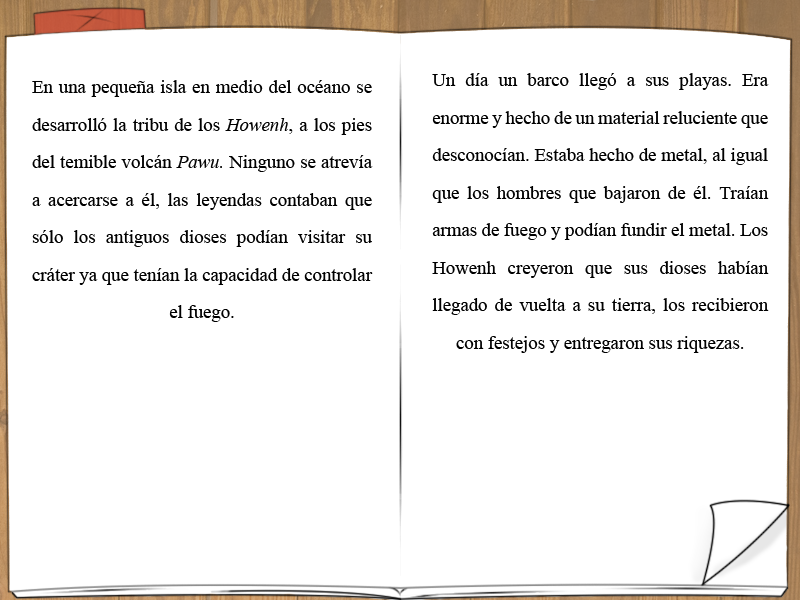
<style>
.page{position:relative;width:800px;height:600px;background:#ffffff}
.page>*{position:absolute;margin:0}
.t1{font:18.7px/37.5px "TimesNewRomanPSMT";color:#000000}
.t2{font:18.7px/37.5px "TimesNewRomanPS-ItalicMT";color:#000000}
</style>
<div class="page">
<p class="t1" style="left:432px;top:73px;width:337px;height:280px;text-align:justify">Un día un barco llegó a sus playas. Era enorme y hecho de un material reluciente que desconocían. Estaba hecho de metal, al igual que los hombres que bajaron de él. Traían armas de fuego y podían fundir el metal. Los Howenh creyeron que sus dioses habían llegado de vuelta a su tierra, los recibieron con festejos y entregaron sus riquezas.</p>
<p class="t1" style="left:32px;top:80px;width:341px;height:242px;text-align:justify">En una pequeña isla en medio del océano se desarrolló la tribu de los <span class="t2">Howenh</span>, a los pies del temible volcán <span class="t2">Pawu.</span> Ninguno se atrevía a acercarse a él, las leyendas contaban que sólo los antiguos dioses podían visitar su cráter ya que tenían la capacidad de controlar el fuego.</p>
</div>
